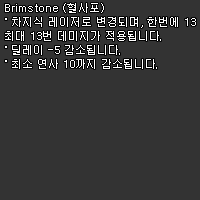
<style>
.page{position:relative;width:200px;height:200px;background:#333333}
.page>*{position:absolute;margin:0}
.t1{font:11px/14px "Dotum";color:#ffffff}
</style>
<div class="page">
<p class="t1" style="left:5px;top:3px;width:191px;height:66px">Brimstone (혈사포)<br>˚ 차지식 레이저로 변경되며, 한번에 13<br>최대 13번 데미지가 적용됩니다.<br>˚ 딜레이 -5 감소됩니다. <br>˚ 최소 연사 10까지 감소됩니다.</p>
</div>
